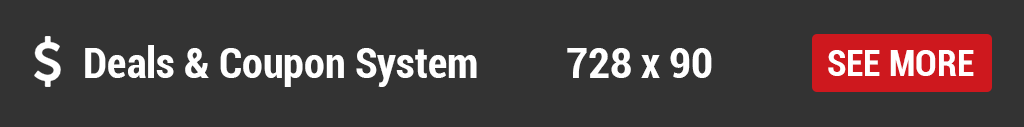
<style>
.page{position:relative;width:1024px;height:127px;background:#333333}
.page>*{position:absolute;margin:0}
.t1{font:42px "Roboto-BoldCondensed";color:#ffffff}
.t2{font:36px "Roboto-BoldCondensed";color:#ffffff}
</style>
<div class="page">
<p class="t1" style="left:85px;top:45px;width:392px;height:42px">Deals &amp; Coupon System</p>
<p class="t1" style="left:567px;top:48px;width:145px;height:30px">728 x 90</p>
<p class="t2" style="left:828px;top:50px;width:146px;height:26px">SEE MORE</p>
</div>
